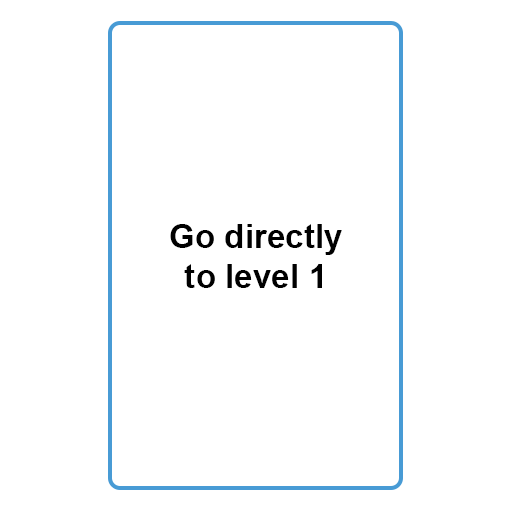
<style>
.page{position:relative;width:512px;height:512px;background:#ffffff}
.page>*{position:absolute;margin:0}
.t1{font:33.3px "Arial-BoldMT";color:#000000}
</style>
<div class="page">
<p class="t1" style="left:170px;top:224px;width:172px;height:64px;text-align:center">Go directly<br>to level 1</p>
</div>
